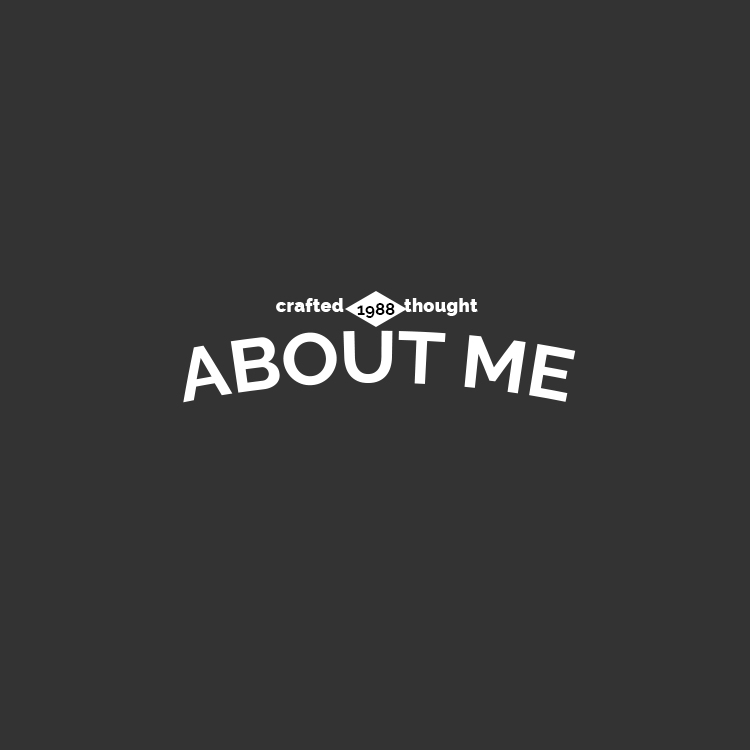
<style>
.page{position:relative;width:750px;height:750px;background:#333333}
.page>*{position:absolute;margin:0}
.t1{font:18.3px "Raleway-Black";letter-spacing:0.005em;color:#ffffff}
.t2{font:16.7px "Raleway-Bold";letter-spacing:0.005em;color:#000000}
.t3{font:73.4px "Raleway-Bold";color:#ffffff}
</style>
<div class="page">
<p class="t1" style="left:276px;top:298px;width:68px;height:14px">crafted</p>
<p class="t2" style="left:357px;top:303px;width:38px;height:15px">1988</p>
<p class="t1" style="left:404px;top:298px;width:74px;height:18px">thought</p>
<p class="t3" style="left:183px;top:330px;width:393px;height:73px">ABOUT ME</p>
</div>
